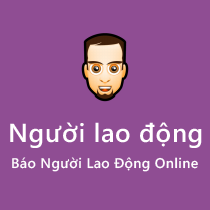
<style>
.page{position:relative;width:210px;height:210px;background:#8f4d93}
.page>*{position:absolute;margin:0}
.t1{font:26px "SegoeWP-Semibold";letter-spacing:0.025em;color:#ffffff}
.t2{font:14px "SegoeWP-Semibold";letter-spacing:0.025em;color:#fefefe}
</style>
<div class="page">
<p class="t1" style="left:10px;top:122px;width:192px;height:26px">Người lao động</p>
<p class="t2" style="left:12px;top:157px;width:186px;height:15px">Báo Người Lao Động Online</p>
</div>
